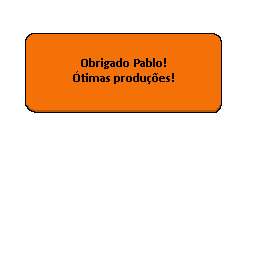
<style>
.page{position:relative;width:256px;height:256px;background:#ffffff}
.page>*{position:absolute;margin:0}
.t1{font:12.5px "Calibri-Bold";color:#000000}
</style>
<div class="page">
<p class="t1" style="left:73px;top:58px;width:101px;height:26px;text-align:center">Obrigado Pablo!<br>Ótimas produções!</p>
</div>
